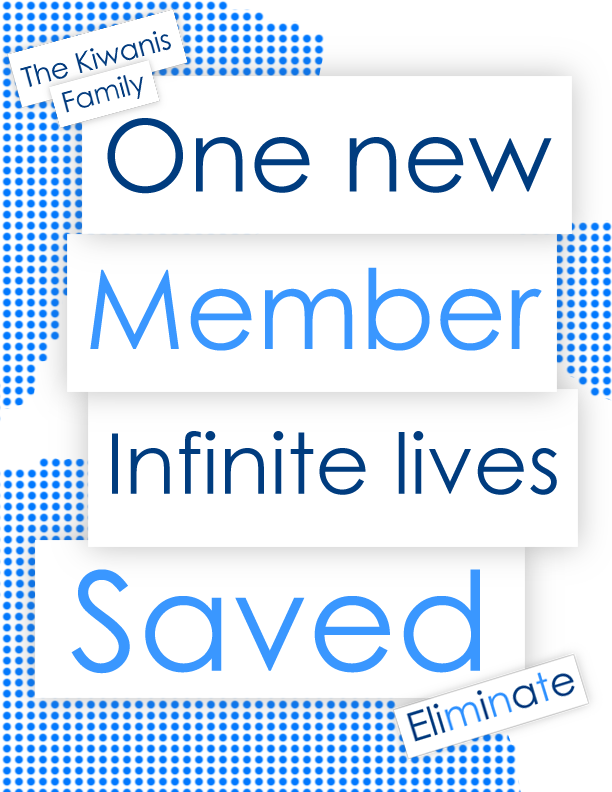
<style>
.page{position:relative;width:612px;height:792px;background:#ffffff}
.page>*{position:absolute;margin:0}
.t1{font:100px "CenturyGothic";color:#003c7f}
.t2{font:110px "CenturyGothic";color:#3a97ff}
.t3{font:84px "CenturyGothic";color:#003c7f}
.t4{font:137px "CenturyGothic";color:#3a97ff}
</style>
<div class="page">
<p class="t1" style="left:107px;top:118px;width:445px;height:76px">One new</p>
<p class="t2" style="left:90px;top:267px;width:452px;height:84px">Member</p>
<p class="t3" style="left:112px;top:431px;width:445px;height:64px">Infinite lives</p>
<p class="t4" style="left:71px;top:569px;width:409px;height:105px">Saved</p>
</div>
